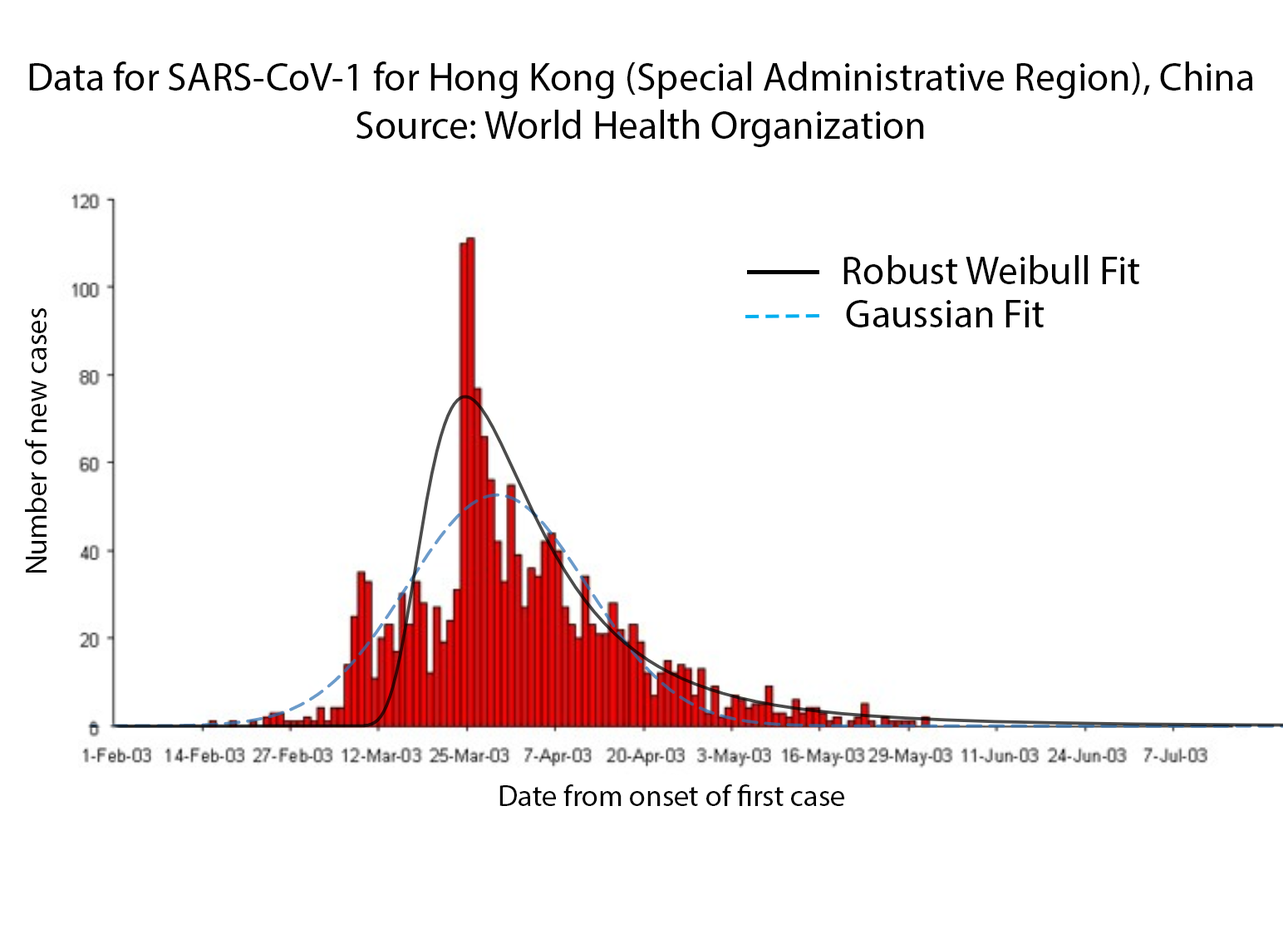
<style>
.page{position:relative;width:1283px;height:929px;background:#ffffff}
.page>*{position:absolute;margin:0}
.t1{font:39.9px "MyriadPro-Regular";color:#000000}
.t2{font:29.9px "MyriadPro-Regular";color:#000000}
</style>
<div class="page">
<p class="t1" style="left:29px;top:62px;width:1224px;height:85px;text-align:center">Data for SARS-CoV-1 for Hong Kong (Special Administrative Region), China<br>Source: World Health Organization</p>
<p class="t1" style="left:844px;top:255px;width:295px;height:29px">Robust Weibull Fit</p>
<p class="t1" style="left:846px;top:300px;width:198px;height:27px">Gaussian Fit</p>
<p class="t2" style="left:25px;top:308px;width:22px;height:265px;rotate:-90deg">Number of new cases</p>
<p class="t2" style="left:500px;top:785px;width:344px;height:21px">Date from onset of first case</p>
</div>
